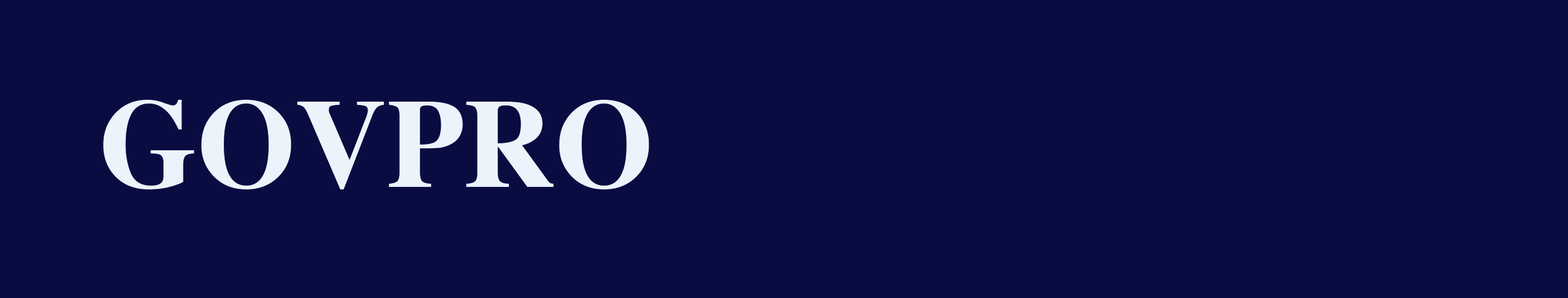
<style>
.page{position:relative;width:1568px;height:298px;background:#080c41}
.page>*{position:absolute;margin:0}
.t1{font:126.5px "Times-Bold";color:#ecf3fb}
</style>
<div class="page">
<p class="t1" style="left:103px;top:100px;width:546px;height:90px">GOVPRO</p>
</div>
